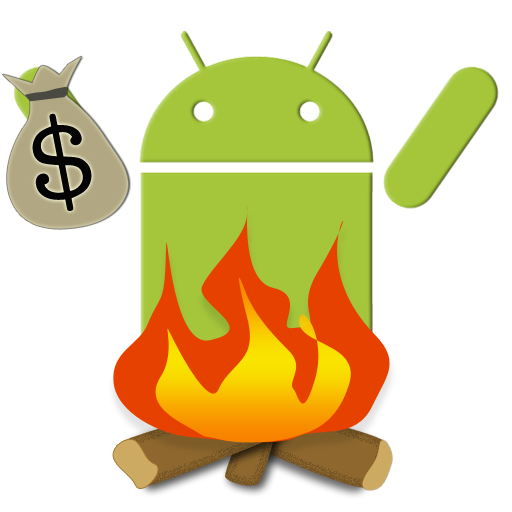
<style>
.page{position:relative;width:512px;height:512px;background:#ffffff}
.page>*{position:absolute;margin:0}
.t1{font:109.9px "AmericanTypewriter";color:#040404}
</style>
<div class="page">
<p class="t1" style="left:32px;top:113px;width:60px;height:98px;rotate:-11deg">$</p>
</div>
